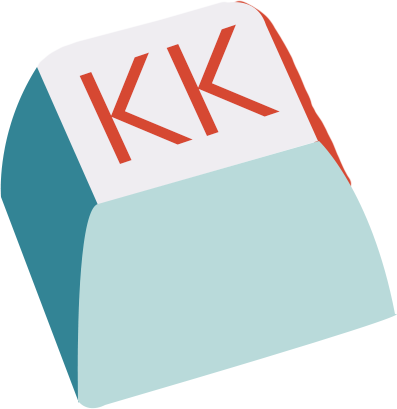
<style>
.page{position:relative;width:397px;height:409px;background:#b9dada}
.page>*{position:absolute;margin:0}
.t1{font:148.1px "Corbel";color:#d64832}
</style>
<div class="page">
<p class="t1" style="left:166px;top:24px;width:114px;height:112px;rotate:-19deg">K</p>
<p class="t1" style="left:79px;top:52px;width:114px;height:112px;rotate:-19deg">K</p>
</div>
